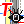
<style>
.page{position:relative;width:24px;height:24px;background:#ffffff}
.page>*{position:absolute;margin:0}
.t1{font:18px "Arial-BoldItalicMT";letter-spacing:-0.025em;color:#ff0000}
</style>
<div class="page">
<p class="t1" style="left:1px;top:3px;width:12px;height:13px">T</p>
</div>
